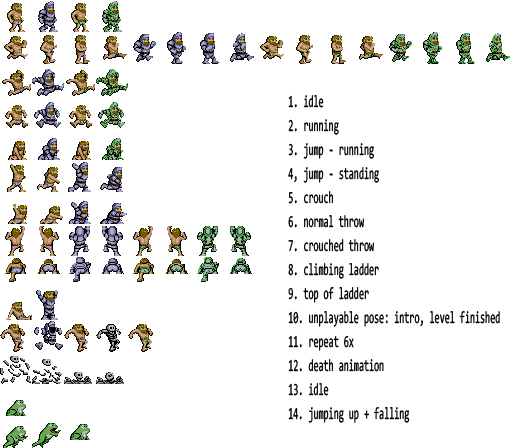
<style>
.page{position:relative;width:512px;height:448px;background:#ffffff}
.page>*{position:absolute;margin:0}
.t1{font:17px/24px "Consolas";color:#000000;scale:0.54 1}
</style>
<div class="page">
<p class="t1" style="left:288px;top:95px;width:212px;height:328px">1. idle<br>2. running<br>3. jump - running<br>4, jump - standing<br>5. crouch<br>6. normal throw<br>7. crouched throw<br>8. climbing ladder<br>9. top of ladder<br>10. unplayable pose: intro, level finished<br>11. repeat 6x<br>12. death animation<br>13. idle<br>14. jumping up + falling</p>
</div>
